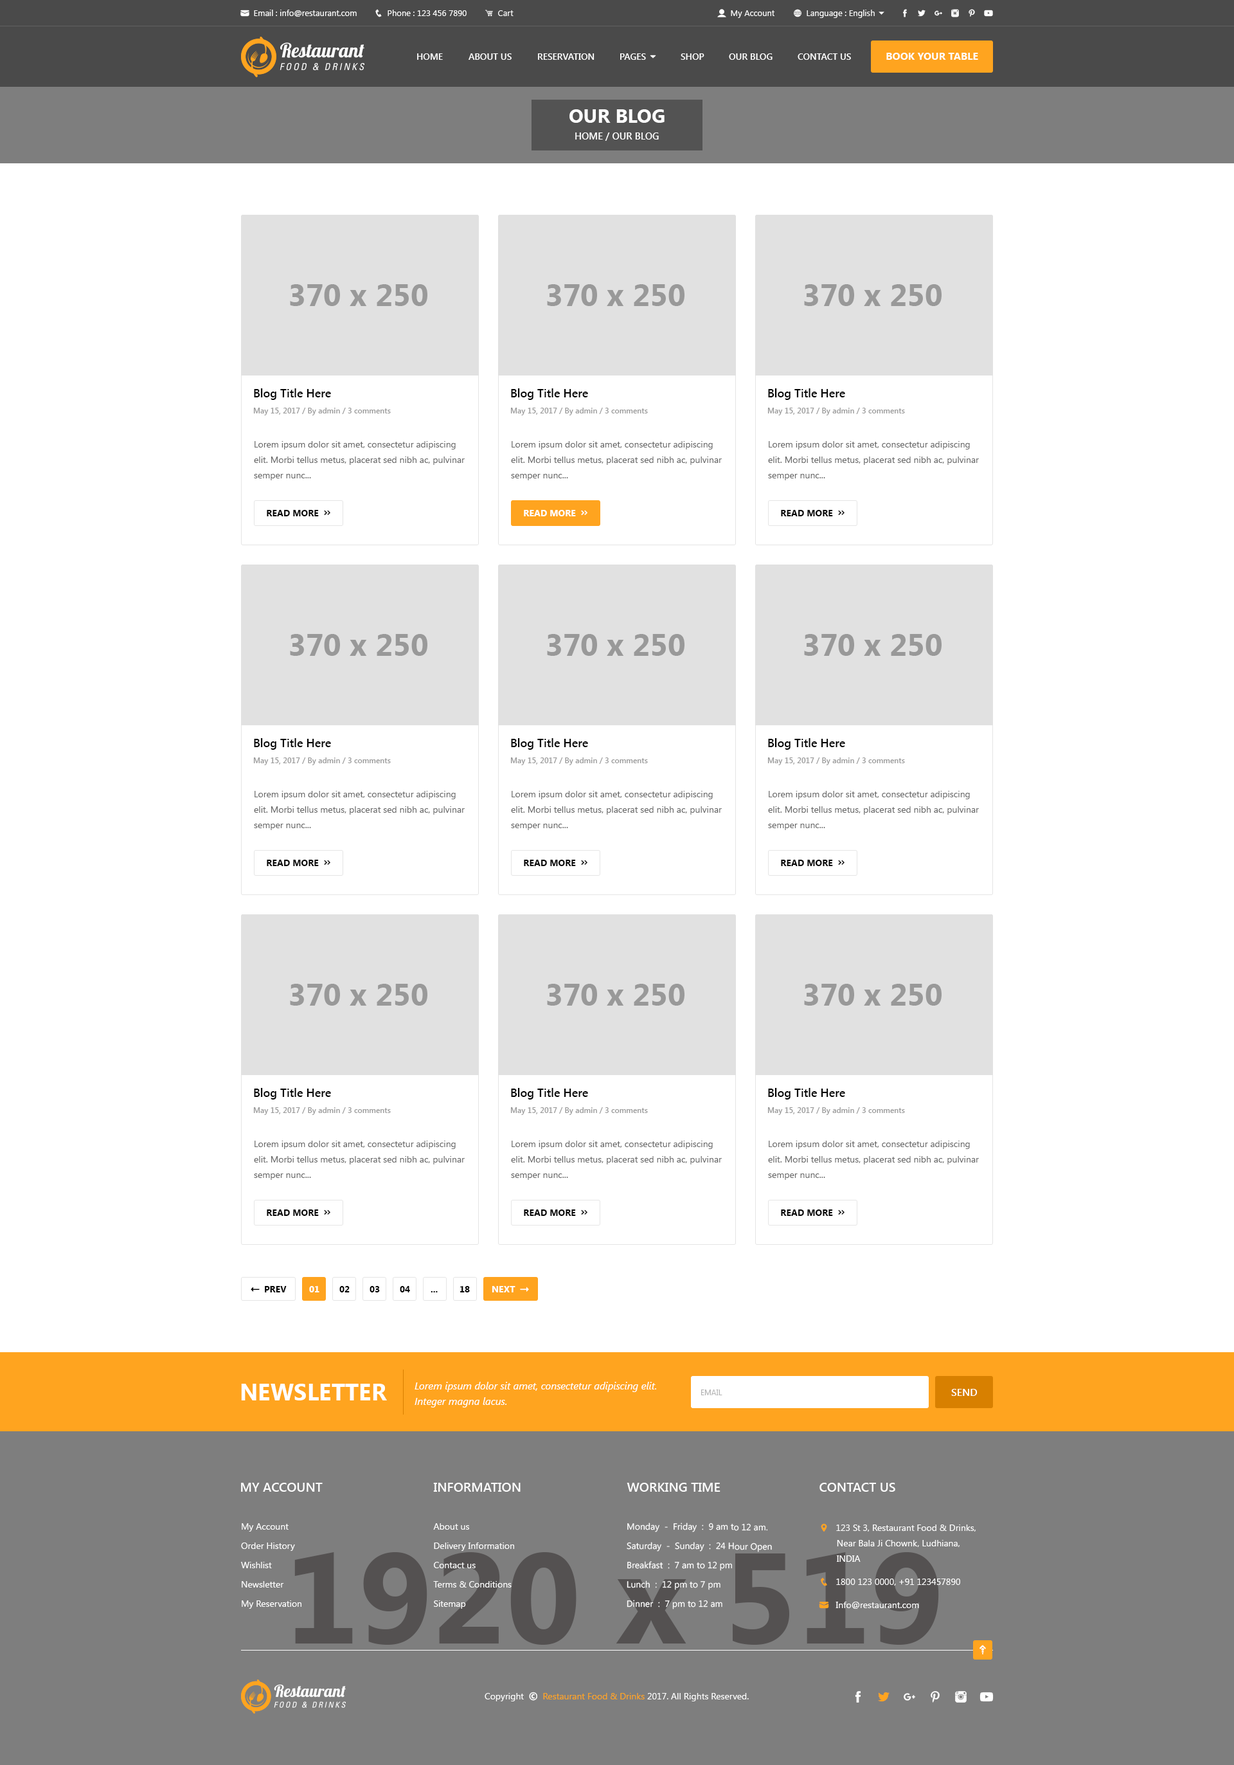
<style>
.page{position:relative;width:1234px;height:1765px;background:#ffffff}
.page>*{position:absolute;margin:0}
.t1{font:9px "SegoeUI-SemiBold";color:#ffffff}
.t2{font:10.3px "SegoeUI-Bold";color:#ffffff}
.t3{font:19.3px "SegoeUI-Bold";color:#ffffff}
.t4{font:9.6px "SegoeUI-SemiBold";color:#ffffff}
.t5{font:30.9px "SegoeUI-Bold";color:#999999}
.t6{font:11.6px "SegoeUI-SemiBold";color:#000000}
.t7{font:7.7px "SegoeUI-SemiBold";color:#999999}
.t8{font:9px/15.4px "SegoeUI";color:#686868}
.t9{font:9px "SegoeUI-Bold";color:#000000}
.t10{font:9px "SegoeUI-Bold";color:#ffffff}
.t11{font:23.1px "SegoeUI-Bold";color:#ffffff}
.t12{font:10.3px/15.4px "SegoeUI-Italic";color:#ffffff}
.t13{font:7.7px "SegoeUI";color:#b2b2b2;text-transform:uppercase}
.t14{font:10.3px "SegoeUI-SemiBold";color:#ffffff}
.t15{font:12.9px "SegoeUI-SemiBold";color:#ffffff}
.t16{font:9px/19.3px "SegoeUI";color:#ffffff}
.t17{font:128.6px "SegoeUI-Bold";color:#545151}
</style>
<div class="page">
<p class="t1" style="left:417px;top:53px;width:26px;height:7px">HOME</p>
<p class="t1" style="left:469px;top:53px;width:43px;height:7px">ABOUT US</p>
<p class="t1" style="left:538px;top:53px;width:57px;height:7px">RESERVATION</p>
<p class="t1" style="left:681px;top:53px;width:24px;height:7px">SHOP</p>
<p class="t1" style="left:729px;top:53px;width:44px;height:7px">OUR BLOG</p>
<p class="t1" style="left:798px;top:53px;width:53px;height:7px">CONTACT US</p>
<p class="t2" style="left:887px;top:53px;width:91px;height:7px">BOOK YOUR TABLE</p>
<p class="t3" style="left:570px;top:109px;width:95px;height:14px">OUR BLOG</p>
<p class="t4" style="left:575px;top:132px;width:84px;height:9px">HOME / OUR BLOG</p>
<p class="t5" style="left:290px;top:284px;width:138px;height:22px">370 x 250</p>
<p class="t5" style="left:547px;top:284px;width:138px;height:22px">370 x 250</p>
<p class="t5" style="left:804px;top:284px;width:138px;height:22px">370 x 250</p>
<p class="t6" style="left:254px;top:388px;width:77px;height:12px">Blog Title Here</p>
<p class="t6" style="left:511px;top:388px;width:77px;height:12px">Blog Title Here</p>
<p class="t6" style="left:768px;top:388px;width:77px;height:12px">Blog Title Here</p>
<p class="t7" style="left:253px;top:408px;width:138px;height:7px">May 15, 2017 / By admin / 3 comments</p>
<p class="t7" style="left:510px;top:408px;width:138px;height:7px">May 15, 2017 / By admin / 3 comments</p>
<p class="t7" style="left:768px;top:408px;width:137px;height:7px">May 15, 2017 / By admin / 3 comments</p>
<p class="t8" style="left:254px;top:441px;width:211px;height:39px">Lorem ipsum dolor sit amet, consectetur adipiscing elit. Morbi tellus metus, placerat sed nibh ac, pulvinar semper nunc...</p>
<p class="t8" style="left:511px;top:441px;width:211px;height:39px">Lorem ipsum dolor sit amet, consectetur adipiscing elit. Morbi tellus metus, placerat sed nibh ac, pulvinar semper nunc...</p>
<p class="t8" style="left:768px;top:441px;width:211px;height:39px">Lorem ipsum dolor sit amet, consectetur adipiscing elit. Morbi tellus metus, placerat sed nibh ac, pulvinar semper nunc...</p>
<p class="t9" style="left:267px;top:510px;width:52px;height:6px">READ MORE</p>
<p class="t10" style="left:524px;top:510px;width:52px;height:6px">READ MORE</p>
<p class="t9" style="left:781px;top:510px;width:52px;height:6px">READ MORE</p>
<p class="t5" style="left:290px;top:634px;width:138px;height:22px">370 x 250</p>
<p class="t5" style="left:547px;top:634px;width:138px;height:22px">370 x 250</p>
<p class="t5" style="left:804px;top:634px;width:138px;height:22px">370 x 250</p>
<p class="t6" style="left:254px;top:738px;width:77px;height:12px">Blog Title Here</p>
<p class="t6" style="left:511px;top:738px;width:77px;height:12px">Blog Title Here</p>
<p class="t6" style="left:768px;top:738px;width:77px;height:12px">Blog Title Here</p>
<p class="t7" style="left:253px;top:757px;width:138px;height:8px">May 15, 2017 / By admin / 3 comments</p>
<p class="t7" style="left:510px;top:757px;width:138px;height:8px">May 15, 2017 / By admin / 3 comments</p>
<p class="t7" style="left:768px;top:757px;width:137px;height:8px">May 15, 2017 / By admin / 3 comments</p>
<p class="t8" style="left:254px;top:791px;width:211px;height:39px">Lorem ipsum dolor sit amet, consectetur adipiscing elit. Morbi tellus metus, placerat sed nibh ac, pulvinar semper nunc...</p>
<p class="t8" style="left:511px;top:791px;width:211px;height:39px">Lorem ipsum dolor sit amet, consectetur adipiscing elit. Morbi tellus metus, placerat sed nibh ac, pulvinar semper nunc...</p>
<p class="t8" style="left:768px;top:791px;width:211px;height:39px">Lorem ipsum dolor sit amet, consectetur adipiscing elit. Morbi tellus metus, placerat sed nibh ac, pulvinar semper nunc...</p>
<p class="t9" style="left:267px;top:860px;width:52px;height:6px">READ MORE</p>
<p class="t9" style="left:524px;top:860px;width:52px;height:6px">READ MORE</p>
<p class="t9" style="left:781px;top:860px;width:52px;height:6px">READ MORE</p>
<p class="t5" style="left:290px;top:984px;width:138px;height:21px">370 x 250</p>
<p class="t5" style="left:547px;top:984px;width:138px;height:21px">370 x 250</p>
<p class="t5" style="left:804px;top:984px;width:138px;height:21px">370 x 250</p>
<p class="t6" style="left:254px;top:1088px;width:77px;height:11px">Blog Title Here</p>
<p class="t6" style="left:511px;top:1088px;width:77px;height:11px">Blog Title Here</p>
<p class="t6" style="left:768px;top:1088px;width:77px;height:11px">Blog Title Here</p>
<p class="t7" style="left:253px;top:1107px;width:138px;height:8px">May 15, 2017 / By admin / 3 comments</p>
<p class="t7" style="left:510px;top:1107px;width:138px;height:8px">May 15, 2017 / By admin / 3 comments</p>
<p class="t7" style="left:768px;top:1107px;width:137px;height:8px">May 15, 2017 / By admin / 3 comments</p>
<p class="t8" style="left:254px;top:1140px;width:211px;height:40px">Lorem ipsum dolor sit amet, consectetur adipiscing elit. Morbi tellus metus, placerat sed nibh ac, pulvinar semper nunc...</p>
<p class="t8" style="left:511px;top:1140px;width:211px;height:40px">Lorem ipsum dolor sit amet, consectetur adipiscing elit. Morbi tellus metus, placerat sed nibh ac, pulvinar semper nunc...</p>
<p class="t8" style="left:768px;top:1140px;width:211px;height:40px">Lorem ipsum dolor sit amet, consectetur adipiscing elit. Morbi tellus metus, placerat sed nibh ac, pulvinar semper nunc...</p>
<p class="t9" style="left:267px;top:1209px;width:52px;height:7px">READ MORE</p>
<p class="t9" style="left:524px;top:1209px;width:52px;height:7px">READ MORE</p>
<p class="t9" style="left:781px;top:1209px;width:52px;height:7px">READ MORE</p>
<p class="t9" style="left:265px;top:1286px;width:22px;height:6px">PREV</p>
<p class="t10" style="left:309px;top:1286px;width:11px;height:6px">01</p>
<p class="t9" style="left:339px;top:1286px;width:11px;height:6px">02</p>
<p class="t9" style="left:370px;top:1286px;width:10px;height:6px">03</p>
<p class="t9" style="left:400px;top:1286px;width:10px;height:6px">04</p>
<p class="t9" style="left:460px;top:1286px;width:10px;height:6px">18</p>
<p class="t10" style="left:492px;top:1286px;width:24px;height:6px">NEXT</p>
<p class="t9" style="left:431px;top:1291px;width:7px;height:1px">...</p>
<p class="t11" style="left:241px;top:1383px;width:146px;height:17px">NEWSLETTER</p>
<p class="t12" style="left:415px;top:1382px;width:241px;height:25px">Lorem ipsum dolor sit amet, consectetur adipiscing elit. Integer magna lacus.</p>
<p class="t13" style="left:701px;top:1389px;width:22px;height:6px">Email</p>
<p class="t14" style="left:951px;top:1389px;width:27px;height:7px">SEND</p>
<p class="t15" style="left:241px;top:1482px;width:82px;height:9px">MY ACCOUNT</p>
<p class="t15" style="left:433px;top:1482px;width:88px;height:9px">INFORMATION</p>
<p class="t15" style="left:627px;top:1482px;width:94px;height:9px">WORKING TIME</p>
<p class="t15" style="left:820px;top:1482px;width:76px;height:9px">CONTACT US</p>
<p class="t16" style="left:241px;top:1523px;width:61px;height:85px">My Account<br>Order History<br>Wishlist<br>Newsletter<br>My Reservation</p>
<p class="t16" style="left:433px;top:1523px;width:81px;height:85px">About us<br>Delivery Information<br>Contact us<br>Terms &amp; Conditions<br>Sitemap</p>
<p class="t16" style="left:627px;top:1522px;width:145px;height:87px">Monday  -  Friday  :  9 am to 12 am.<br>Saturday  -  Sunday  :  24 Hour Open<br>Breakfast  :  7 am to 12 pm<br>Lunch  :  12 pm to 7 pm<br>Dinner  :  7 pm to 12 am</p>
<p class="t17" style="left:294px;top:1552px;width:645px;height:92px">1920 x 519</p>
</div>
